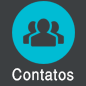
<style>
.page{position:relative;width:86px;height:86px;background:#3c3f41}
.page>*{position:absolute;margin:0}
.t1{font:15.6px "Helvetica-Normal";letter-spacing:0.06em;color:#ffffff;scale:0.89 1}
</style>
<div class="page">
<p class="t1" style="left:12px;top:68px;width:62px;height:13px">Contatos</p>
</div>
